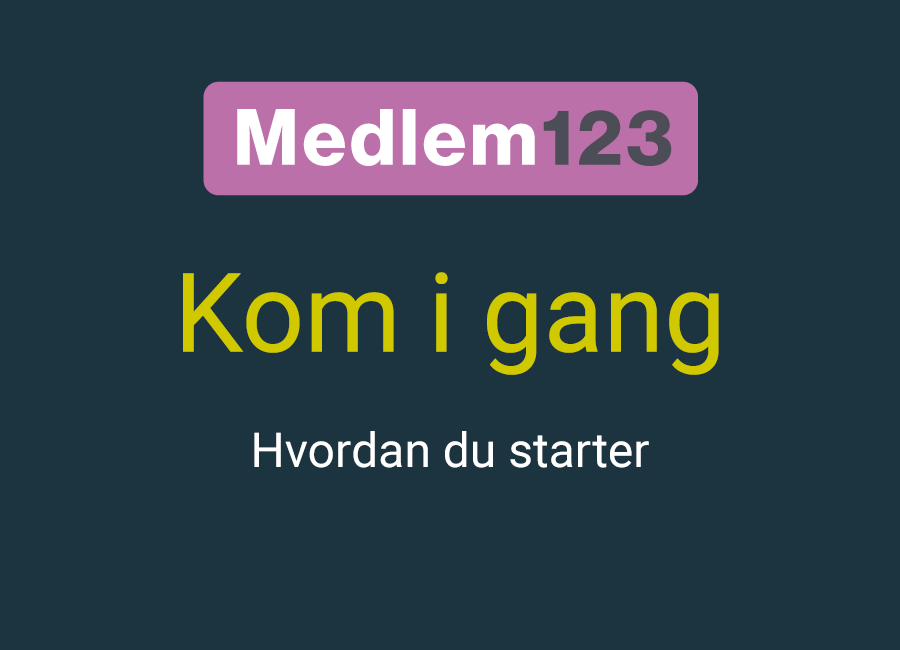
<style>
.page{position:relative;width:900px;height:650px;background:#1b3440}
.page>*{position:absolute;margin:0}
.t1{font:48px "Roboto-Regular";color:#ffffff}
.t2{font:110px "Roboto-Regular";color:#d0c900}
</style>
<div class="page">
<p class="t1" style="left:183px;top:272px;width:536px;height:196px;text-align:center"><span class="t2">Kom i gang<br><br></span>Hvordan du starter</p>
</div>
